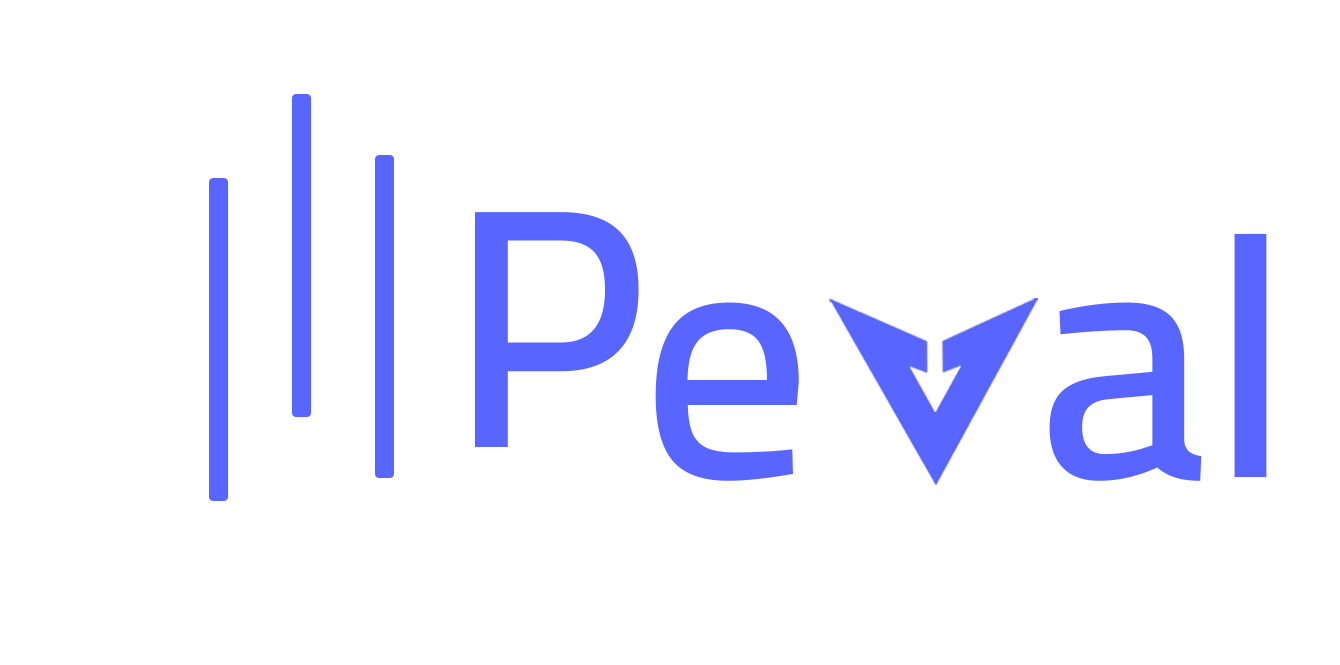
<style>
.page{position:relative;width:1340px;height:665px;background:#ffffff}
.page>*{position:absolute;margin:0}
.t1{font:341.4px "Cairo-SemiBold";color:#5965ff}
</style>
<div class="page">
<p class="t1" style="left:475px;top:212px;width:164px;height:235px">P</p>
<p class="t1" style="left:655px;top:233px;width:612px;height:248px">e   al</p>
</div>
